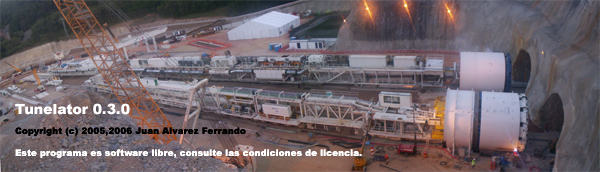
<style>
.page{position:relative;width:600px;height:172px}
.page>*{position:absolute;margin:0}
.t1{font:9px "Arial-Black";color:#ffffff}
.t2{font:14px "Arial-Black";color:#ffffff}
.t3{font:9px "Arial-Black";color:#000000}
</style>
<div class="page">
<p class="t1" style="left:15px;top:103px;width:347px;height:55px"><span class="t2">Tunelator 0.3.0<br><br></span><span class="t3">Copyright (c) 2005,2006 Juan Alvarez Ferrando<br><br></span>Este programa es software libre, consulte las condiciones de licencia.</p>
</div>
